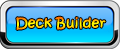
<style>
.page{position:relative;width:120px;height:49px}
.page>*{position:absolute;margin:0}
.t1{font:13.3px "KristenITC-Regular";font-weight:bold}
</style>
<div class="page">
<p class="t1" style="left:16px;top:16px;width:90px;height:14px">Deck Builder</p>
</div>
